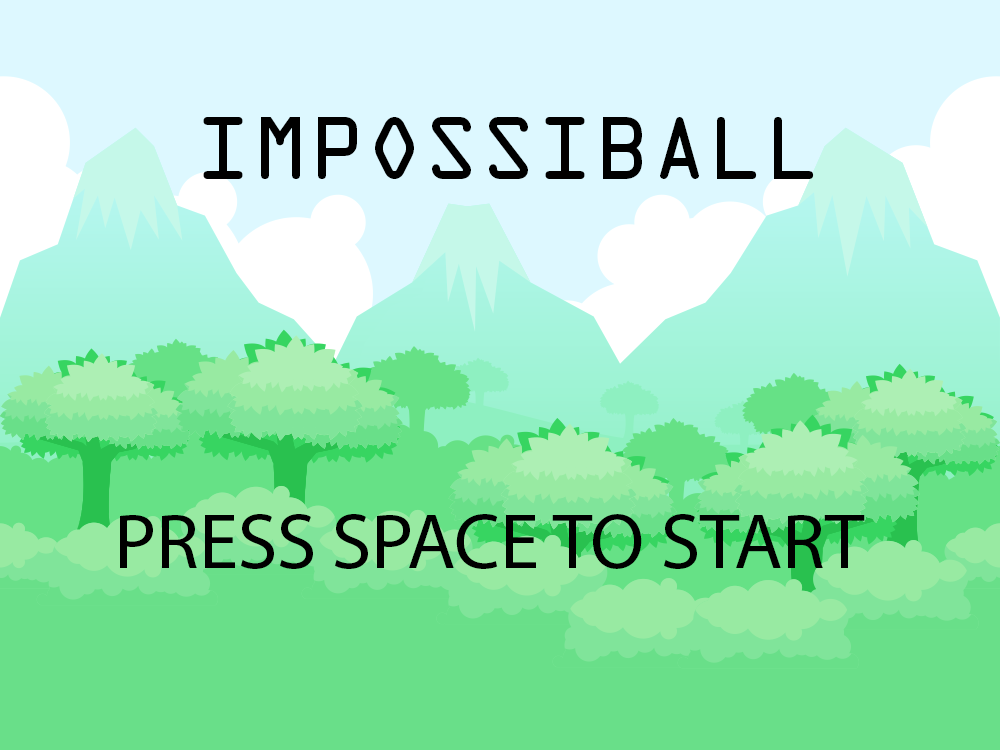
<style>
.page{position:relative;width:1000px;height:750px;background:#ddf8ff}
.page>*{position:absolute;margin:0}
.t1{font:79.2px "OCRAStd";color:#000000}
.t2{font:79.2px "MyriadPro-Regular";color:#000000}
</style>
<div class="page">
<p class="t1" style="left:203px;top:117px;width:611px;height:62px">IMPOSSIBALL</p>
<p class="t2" style="left:120px;top:514px;width:745px;height:55px">PRESS SPACE TO START</p>
</div>
